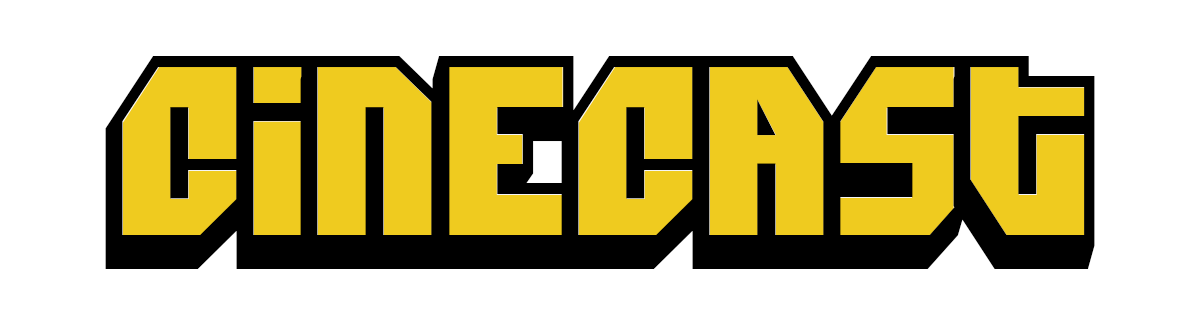
<style>
.page{position:relative;width:1191px;height:327px;background:#ffffff}
.page>*{position:absolute;margin:0}
.t1{font:240.8px "DimitriSwank";color:#000000}
.t2{font:240.8px "Dimitri";color:#efcb1f}
</style>
<div class="page">
<p class="t1" style="left:105px;top:56px;width:990px;height:213px">CineCast</p>
<p class="t2" style="left:122px;top:67px;width:963px;height:169px">CineCast</p>
</div>
